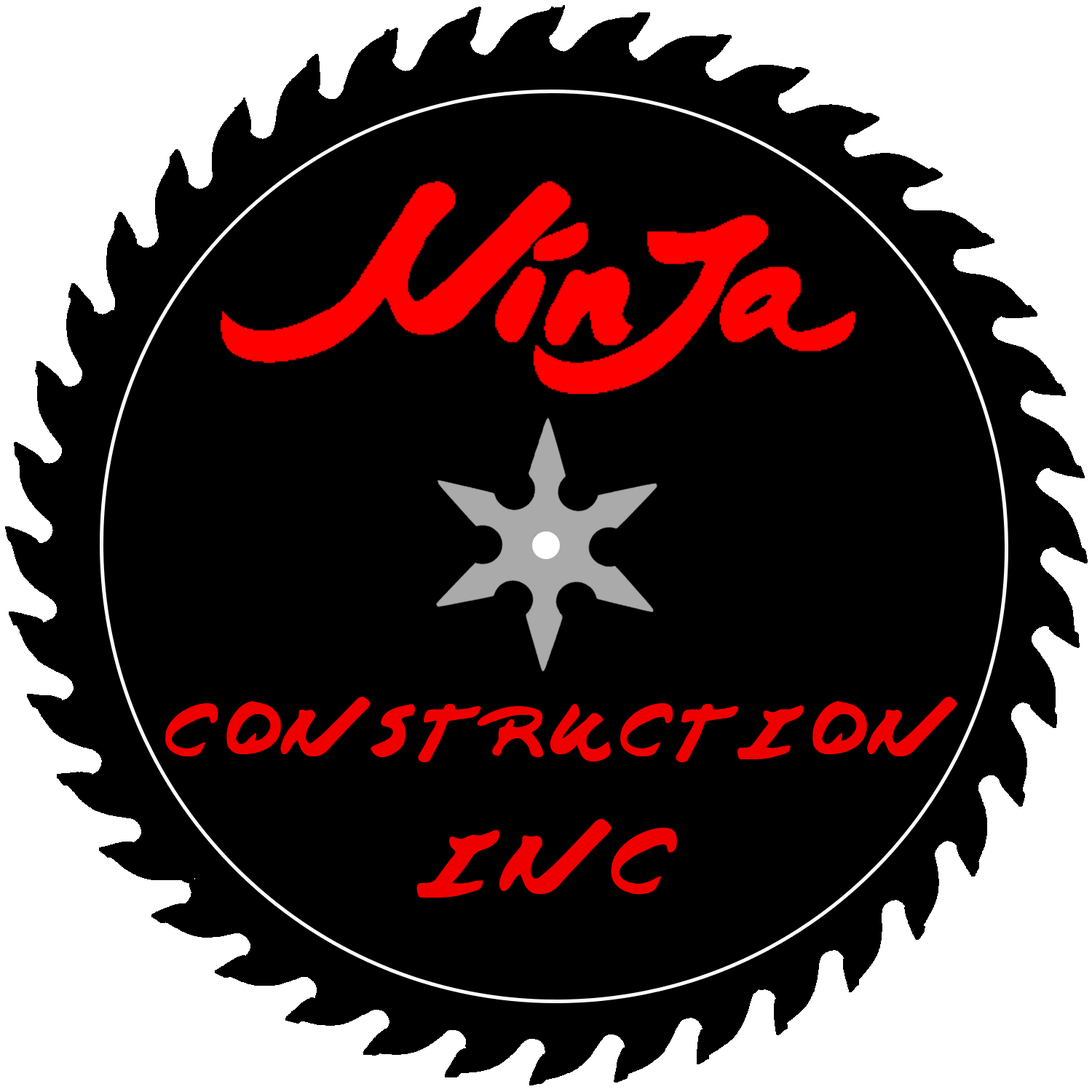
<style>
.page{position:relative;width:1092px;height:1092px;background:#000000}
.page>*{position:absolute;margin:0}
.t1{font:58.2px "JapaneseBrush";color:#ee0000}
.t2{font:72.8px "JapaneseBrush";color:#ee0000}
</style>
<div class="page">
<p class="t1" style="left:165px;top:697px;width:792px;height:65px">CONSTRUCTION</p>
<p class="t2" style="left:416px;top:819px;width:261px;height:79px">INC</p>
</div>
